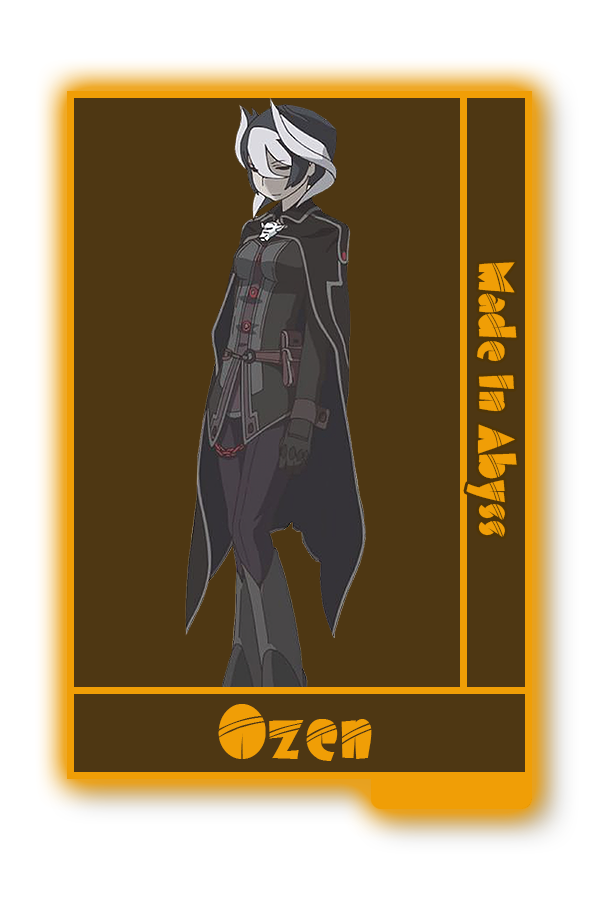
<style>
.page{position:relative;width:600px;height:900px;background:#4e3713}
.page>*{position:absolute;margin:0}
.t1{font:48.8px "AirmoleStripe";color:#f09e06}
.t2{font:75px "AirmoleStripe";color:#f09e06}
</style>
<div class="page">
<p class="t1" style="left:466px;top:262px;width:51px;height:275px;rotate:90deg">Made In Abyss</p>
<p class="t2" style="left:218px;top:704px;width:154px;height:57px">Ozen</p>
</div>
